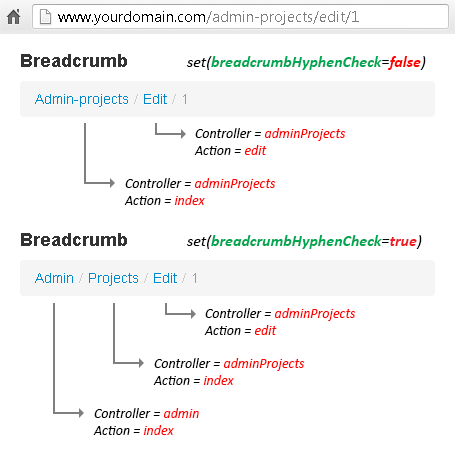
<style>
.page{position:relative;width:455px;height:455px;background:#ffffff}
.page>*{position:absolute;margin:0}
.t1{font:16px "Calibri-BoldItalic";color:#00a651}
.t2{font:16px "Calibri-Italic";color:#000000}
.t3{font:16px "Calibri";color:#000000}
.t4{font:16px "Calibri-BoldItalic";color:#ff0000}
.t5{font:14px "Calibri-Italic";color:#ff0000}
.t6{font:14px "Calibri-Italic";color:#000000}
.t7{font:16px "Calibri-BoldItalic";color:#ed1c24}
</style>
<div class="page">
<p class="t1" style="left:186px;top:56px;width:240px;height:14px"><span class="t2">set(</span>breadcrumbHyphenCheck<span class="t3">=</span><span class="t4">false</span><span class="t2">)</span></p>
<p class="t5" style="left:194px;top:128px;width:152px;height:27px"><span class="t6">Controller = </span>adminProjects<br><span class="t6">Action = </span>edit</p>
<p class="t5" style="left:124px;top:178px;width:152px;height:27px"><span class="t6">Controller = </span>adminProjects<br><span class="t6">Action = </span>index</p>
<p class="t1" style="left:186px;top:235px;width:236px;height:14px"><span class="t2">set(</span>breadcrumbHyphenCheck<span class="t2">=</span><span class="t7">true</span><span class="t2">)</span></p>
<p class="t5" style="left:204px;top:308px;width:152px;height:27px"><span class="t6">Controller = </span>adminProjects<br><span class="t6">Action = </span>edit</p>
<p class="t5" style="left:153px;top:358px;width:152px;height:27px"><span class="t6">Controller = </span>adminProjects<br><span class="t6">Action = </span>index</p>
<p class="t6" style="left:93px;top:408px;width:106px;height:27px">Controller = <span class="t5">admin<br></span>Action = <span class="t5">index</span></p>
</div>
